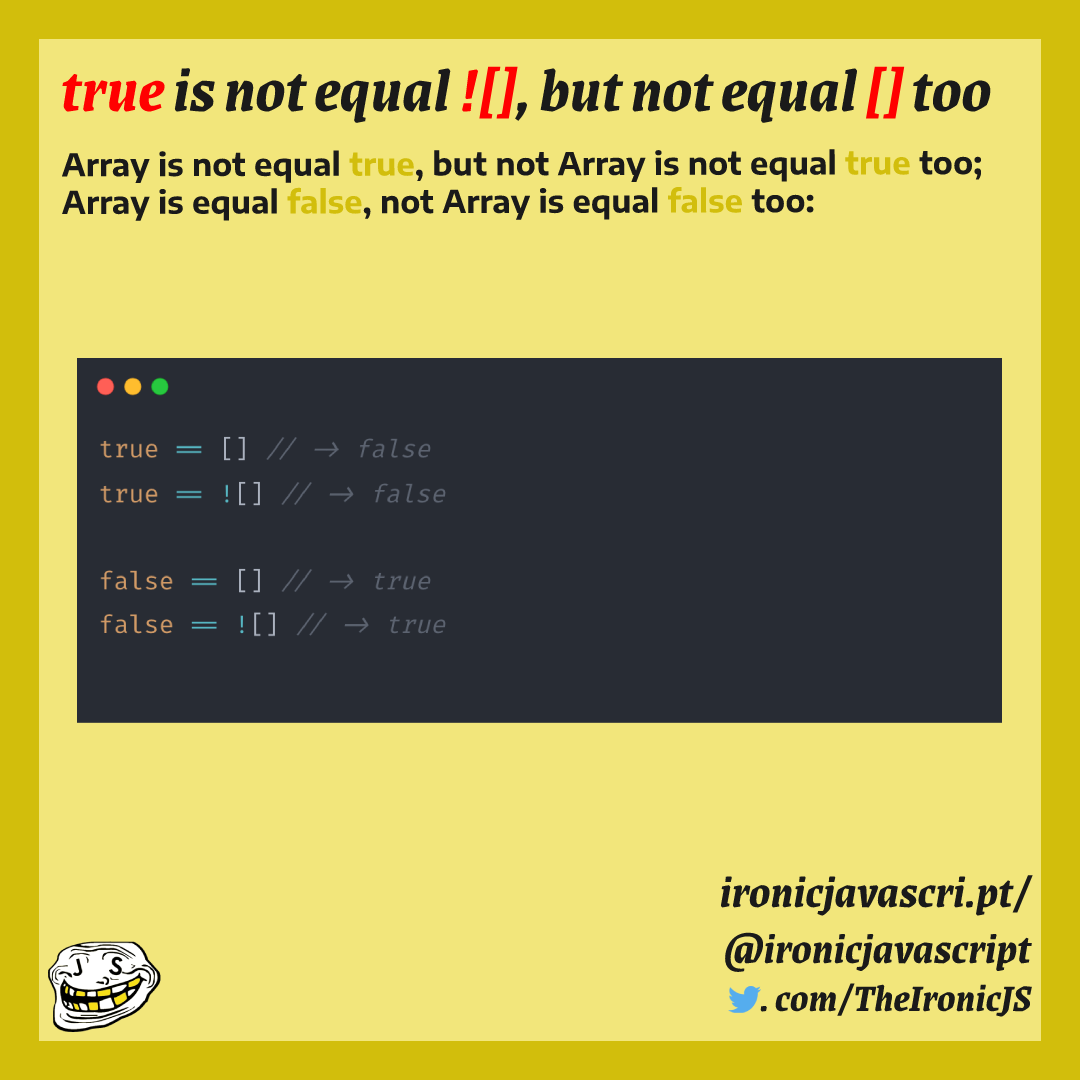
<style>
.page{position:relative;width:1080px;height:1080px;background:#f2e67b}
.page>*{position:absolute;margin:0}
.t1{font:64.8px "Grenze-BoldItalic";color:#1a1a1a}
.t2{font:64.8px "Grenze-BoldItalic";color:#ff0000}
.t3{font:31.4px "EncodeSansSemiExpanded-Bold";color:#1a1a1a}
.t4{font:31.4px "EncodeSansSemiExpanded-Bold";color:#d2be0c}
.t5{font:46.4px "Grenze-BoldItalic";color:#1a1a1a}
.t6{font:44px "Grenze-BoldItalic";color:#1a1a1a}
.t7{font:40px "Grenze-BoldItalic";color:#1a1a1a}
</style>
<div class="page">
<p class="t1" style="left:62px;top:66px;width:929px;height:57px"><span class="t2">true</span> is not equal <span class="t2">![]</span>, but not equal <span class="t2">[]</span> too</p>
<p class="t3" style="left:62px;top:149px;width:919px;height:72px">Array is not equal <span class="t4">true</span>, but not Array is not equal <span class="t4">true</span> too;<br>Array is equal <span class="t4">false</span>, not Array is equal <span class="t4">false</span> too:</p>
<p class="t5" style="left:720px;top:875px;width:313px;height:142px;text-align:right">ironicjavascri.pt/<br><span class="t6">@ironicjavascript<br></span><span class="t7">. com/TheI</span><span class="t7">ronic</span><span class="t7">JS</span></p>
</div>
